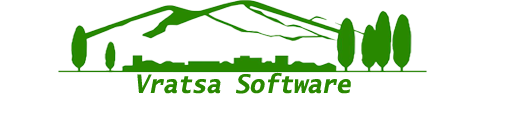
<style>
.page{position:relative;width:512px;height:128px;background:#ffffff}
.page>*{position:absolute;margin:0}
.t1{font:25.5px "LucidaSans-TypewriterBoldOblique";color:#298800;scale:0.94 1}
</style>
<div class="page">
<p class="t1" style="left:137px;top:72px;width:214px;height:22px">Vratsa Software</p>
</div>
